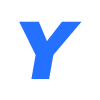
<style>
.page{position:relative;width:100px;height:100px;background:#ffffff}
.page>*{position:absolute;margin:0}
.t1{font:80px "Arial-Black";color:#2470ff;font-style:italic}
</style>
<div class="page">
<p class="t1" style="left:19px;top:21px;width:63px;height:58px">Y</p>
</div>
